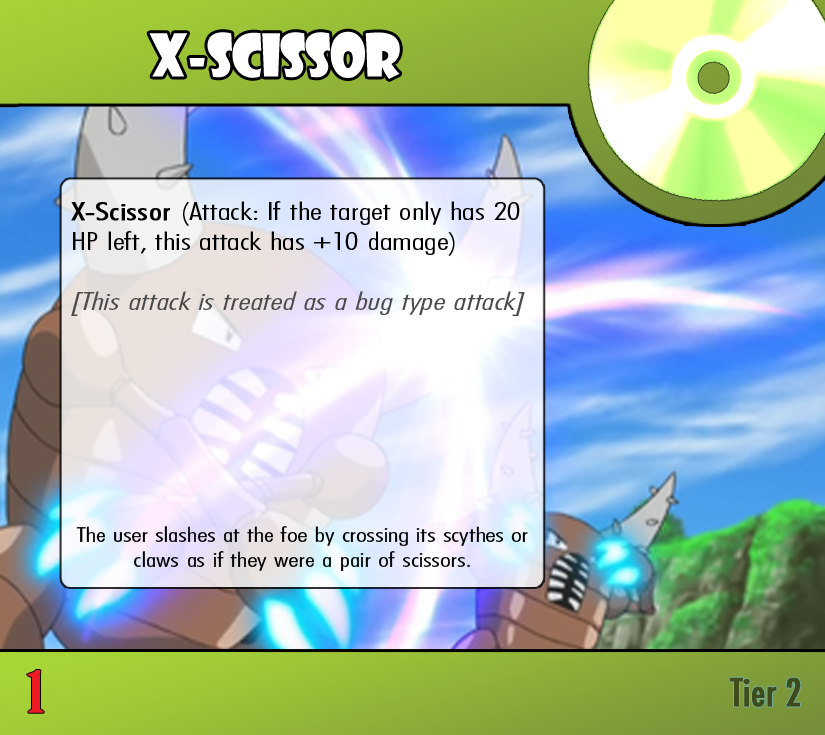
<style>
.page{position:relative;width:825px;height:735px}
.page>*{position:absolute;margin:0}
.t1{font:57.4px "ShowcardGothic-Reg";letter-spacing:-0.025em;color:#ffffff;scale:0.91 1}
.t2{font:25px "FuturaCondensedBQ-Light";color:#000000;scale:1.5 1}
.t3{font:25px "FuturaCondensedBQ-Light";color:#000000;font-weight:bold;scale:1.5 1}
.t4{font:25px "FuturaCondensedBQ-Light";color:#4c4b4b;font-style:italic;scale:1.5 1}
.t5{font:20.8px "FuturaCondensedBQ-Light";color:#000000;scale:1.5 1}
.t6{font:55.6px "BirchStd";color:#ed1c24;font-weight:bold;scale:1.5 1}
.t7{font:37.5px "Futura-Condensed-Normal";color:#3e4c1c;font-weight:bold}
</style>
<div class="page">
<p class="t1" style="left:149px;top:31px;width:251px;height:48px">X-Scissor</p>
<p class="t2" style="left:71px;top:201px;width:454px;height:115px"><span class="t3">X-Scissor </span>(Attack: If the target only has 20 HP left, this attack has +10 damage)<br><br><span class="t4">[This attack is treated as a bug type attack]</span></p>
<p class="t5" style="left:76px;top:526px;width:452px;height:45px;text-align:center">The user slashes at the foe by crossing its scythes or claws as if they were a pair of scissors.</p>
<p class="t6" style="left:27px;top:670px;width:17px;height:43px">1</p>
<p class="t7" style="left:729px;top:677px;width:72px;height:30px">Tier 2</p>
</div>
